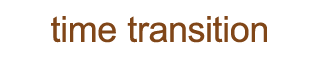
<style>
.page{position:relative;width:320px;height:60px;background:#ffffff}
.page>*{position:absolute;margin:0}
.t1{font:36px "ArialMT";color:#804618}
</style>
<div class="page">
<p class="t1" style="left:51px;top:16px;width:216px;height:27px">time transition</p>
</div>
